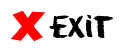
<style>
.page{position:relative;width:124px;height:50px;background:#ffffff}
.page>*{position:absolute;margin:0}
.t1{font:27.4px "ObelixPro";color:#ff0303;scale:1.52 1}
.t2{font:27.5px "Eraser-Regular";color:#000000}
</style>
<div class="page">
<p class="t1" style="left:10px;top:10px;width:36px;height:32px">X</p>
<p class="t2" style="left:49px;top:15px;width:63px;height:23px">exit</p>
<p class="t2" style="left:50px;top:15px;width:63px;height:23px">exit</p>
</div>
